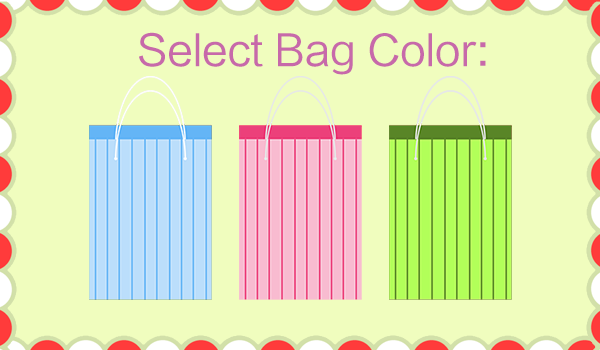
<style>
.page{position:relative;width:600px;height:350px;background:#f0fdbe}
.page>*{position:absolute;margin:0}
.t1{font:41.7px "LTHYSZK";color:#c769aa}
</style>
<div class="page">
<p class="t1" style="left:139px;top:32px;width:347px;height:43px">Select Bag Color:</p>
</div>
